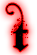
<style>
.page{position:relative;width:37px;height:55px}
.page>*{position:absolute;margin:0}
.t1{font:60px "Dirt2SoulStalker";color:#000000}
</style>
<div class="page">
<p class="t1" style="left:6px;top:3px;width:22px;height:49px">T</p>
</div>
